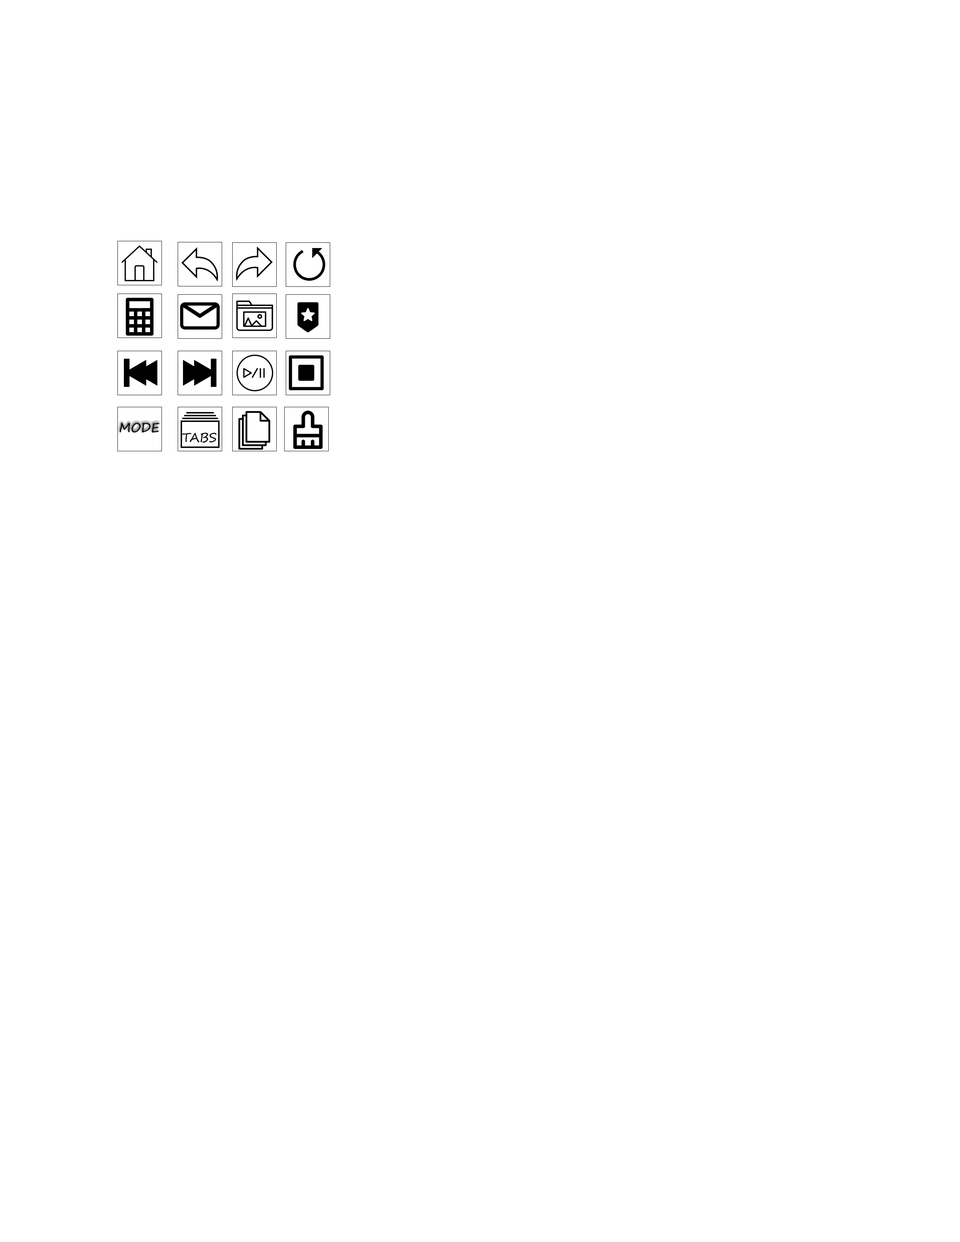
<style>
.page{position:relative;width:960px;height:1242px;background:#ffffff}
.page>*{position:absolute;margin:0}
.t1{font:12.5px "SegoePrint";color:#000000}
</style>
<div class="page">
<p class="t1" style="left:119px;top:423px;width:41px;height:10px">MODE</p>
<p class="t1" style="left:182px;top:433px;width:34px;height:10px">TABS</p>
</div>
